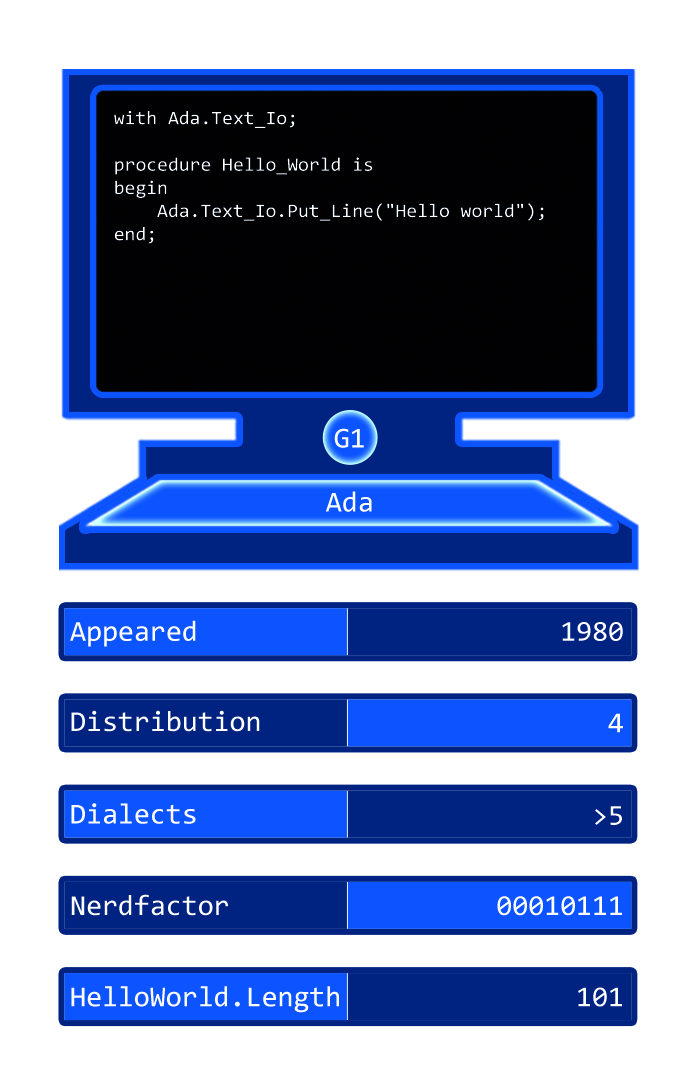
<style>
.page{position:relative;width:697px;height:1087px;background:#ffffff}
.page>*{position:absolute;margin:0}
.t1{font:19.4px "Consolas";color:#ffffff}
.t2{font:29px "Consolas";color:#ffffff}
</style>
<div class="page">
<p class="t1" style="left:114px;top:110px;width:430px;height:134px">with Ada.Text_Io;<br> <br>procedure Hello_World is<br>begin<br>    Ada.Text_Io.Put_Line("Hello world");<br>end;</p>
<p class="t2" style="left:334px;top:428px;width:30px;height:20px">G1</p>
<p class="t2" style="left:326px;top:491px;width:46px;height:21px">Ada</p>
<p class="t2" style="left:70px;top:620px;width:126px;height:27px">Appeared</p>
<p class="t2" style="left:562px;top:622px;width:61px;height:19px">1980</p>
<p class="t2" style="left:71px;top:710px;width:189px;height:22px">Distribution</p>
<p class="t2" style="left:608px;top:713px;width:15px;height:20px">4</p>
<p class="t2" style="left:71px;top:803px;width:125px;height:21px">Dialects</p>
<p class="t2" style="left:595px;top:806px;width:27px;height:19px">&gt;5</p>
<p class="t2" style="left:71px;top:894px;width:157px;height:22px">Nerdfactor</p>
<p class="t2" style="left:497px;top:896px;width:125px;height:20px">00010111</p>
<p class="t2" style="left:71px;top:986px;width:268px;height:27px">HelloWorld.Length</p>
<p class="t2" style="left:578px;top:987px;width:44px;height:20px">101</p>
</div>
